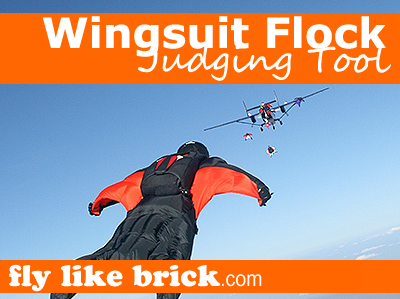
<style>
.page{position:relative;width:400px;height:299px}
.page>*{position:absolute;margin:0}
.t1{font:41.7px "Verdana-Bold";color:#ffffff}
.t2{font:36px "SegoeScript";color:#ffffff}
</style>
<div class="page">
<p class="t1" style="left:42px;top:16px;width:344px;height:41px">Wingsuit Flock</p>
<p class="t2" style="left:138px;top:44px;width:253px;height:37px">Judging Tool</p>
</div>
